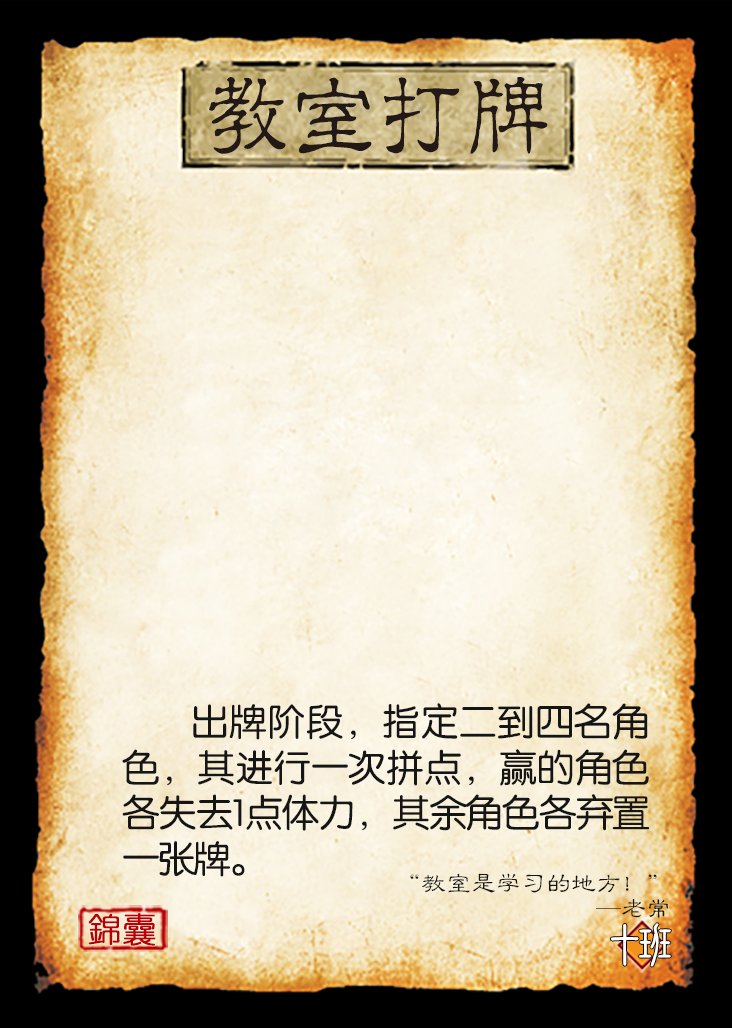
<style>
.page{position:relative;width:732px;height:1028px}
.page>*{position:absolute;margin:0}
.t1{font:91.7px "JMFLS_GBK";color:#221815;scale:0.95 1}
.t2{font:37.5px/45.8px "FZY3JW--GB1-0";letter-spacing:-0.05em;color:#151515}
.t3{font:25px/25px "FZLBJW--GB1-0";color:#151515}
.t4{font:33.3px "YouYuan";color:#ba0007;font-weight:bold}
.t5{font:50px "DFNewChuan-W5-WINP-BF";letter-spacing:-0.4em;color:#ffffff}
</style>
<div class="page">
<p class="t1" style="left:209px;top:76px;width:339px;height:78px">教室打牌</p>
<p class="t2" style="left:122px;top:703px;width:528px;height:174px;text-align:justify">出牌阶段，指定二到四名角色，其进行一次拼点，赢的角色各失去1点体力，其余角色各弃置一张牌。</p>
<p class="t3" style="left:410px;top:873px;width:258px;height:45px;text-align:right">“教室是学习的地方！”<br>                                      —老常</p>
<p class="t4" style="left:88px;top:913px;width:68px;height:33px">錦囊</p>
<p class="t5" style="left:611px;top:923px;width:60px;height:44px">十班</p>
</div>
